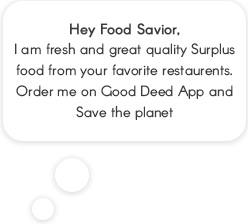
<style>
.page{position:relative;width:248px;height:224px;background:#ffffff}
.page>*{position:absolute;margin:0}
.t1{font:14.6px/20.8px "Arcon-Regular";color:#3d3d3d}
.t2{font:14.6px/20.8px "Arcon-Regular";color:#3d3d3d;font-weight:bold}
</style>
<div class="page">
<p class="t1" style="left:15px;top:23px;width:220px;height:97px;text-align:center"><span class="t2">Hey Food Savior,<br></span>I am fresh and great quality Surplus food from your favorite restaurents. Order me on Good Deed App and <br>Save the planet</p>
</div>
